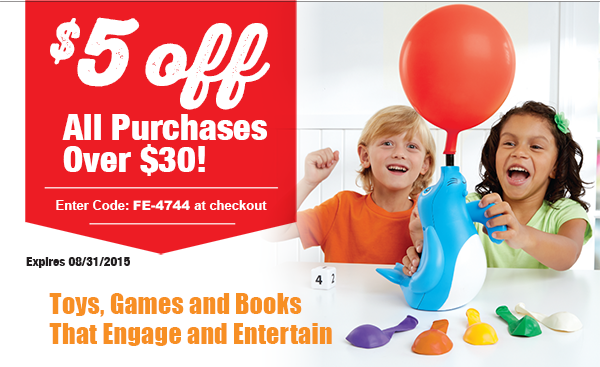
<style>
.page{position:relative;width:600px;height:367px;background:#ffffff}
.page>*{position:absolute;margin:0}
.t1{font:77.6px "ThirstyRoughBlk";color:#ffffff}
.t2{font:94.4px "ThirstyRoughBlk";color:#ffffff}
.t3{font:94.4px "ThirstyRoughBlk";letter-spacing:-0.069em;color:#ffffff}
.t4{font:62.1px/31.6px "HelveticaNeue-CondensedBlack";color:#ffffff}
.t5{font:22.3px "Arial-BoldMT";color:#ffffff}
.t6{font:22.3px "Arial-Black";color:#ffffff}
.t7{font:22px "HelveticaNeue-CondensedBlack";color:#231f20}
.t8{font:43.8px/29.8px "Impact";letter-spacing:0.02em;color:#f78f24}
</style>
<div class="page">
<p class="t1" style="left:50px;top:17px;width:220px;height:93px"><span class="t2">$</span><span class="t3">5 </span>off</p>
<p class="t4" style="left:62px;top:114px;width:205px;height:62px">All Purchases <br>Over $30!</p>
<p class="t5" style="left:56px;top:200px;width:211px;height:10px">Enter Code: <span class="t6">FE-4744 </span>at checkout</p>
<p class="t7" style="left:26px;top:257px;width:104px;height:11px">Expires 08/31/2015</p>
<p class="t8" style="left:49px;top:293px;width:283px;height:53px">Toys, Games and Books <br>That Engage and Entertain</p>
</div>
